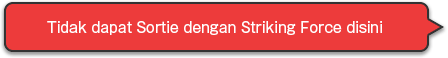
<style>
.page{position:relative;width:448px;height:58px;background:#ed3b3b}
.page>*{position:absolute;margin:0}
.t1{font:14px "GothicMB101Pro-Regular";color:#ffffff}
</style>
<div class="page">
<p class="t1" style="left:47px;top:21px;width:335px;height:14px">Tidak dapat Sortie dengan Striking Force disini</p>
</div>
